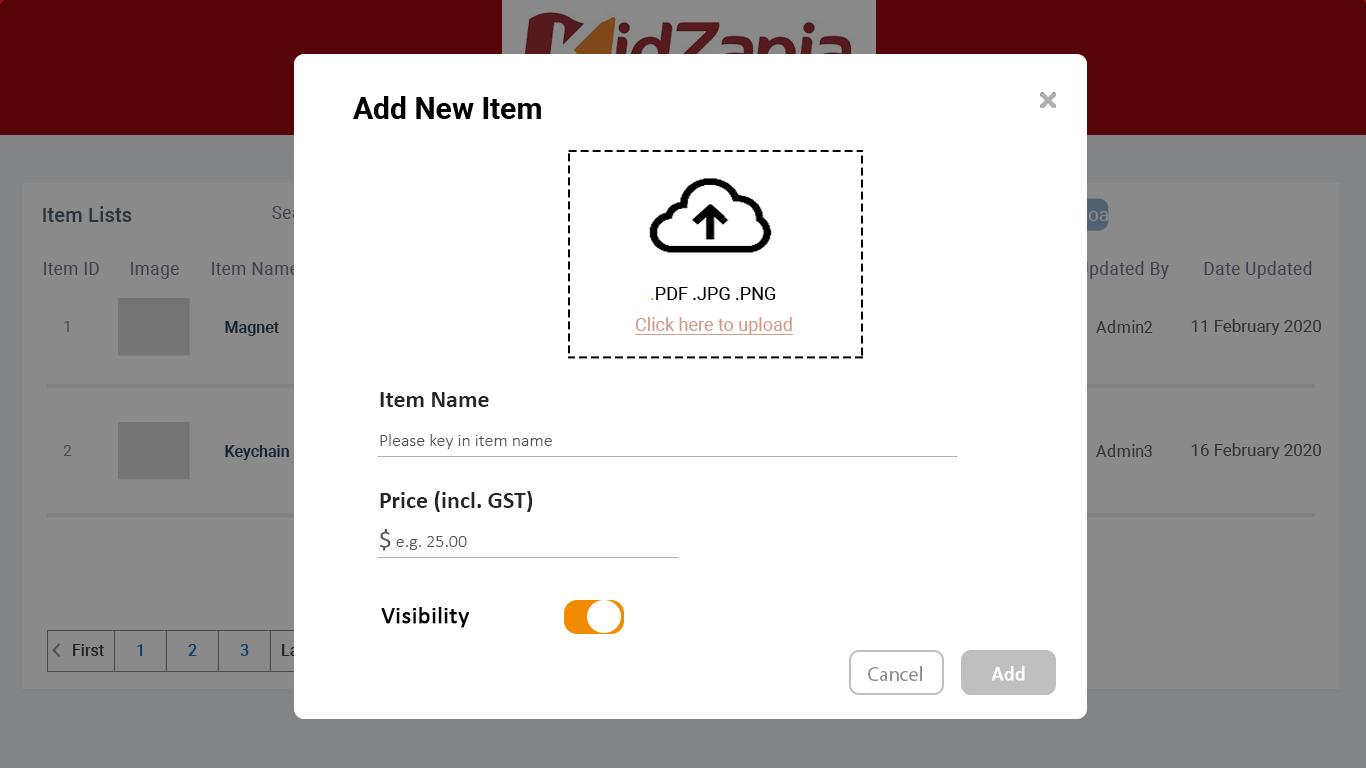
<style>
.page{position:relative;width:1366px;height:768px;background:#ffffff}
.page>*{position:absolute;margin:0}
.t1{font:30px "Roboto-Bold";color:#000000}
.t2{font:20.4px "Roboto-Medium";color:#2b333c}
.t3{font:17.5px "Roboto-Regular";letter-spacing:0.017em;color:#414150}
.t4{font:18px "Roboto-Regular";color:#010101}
.t5{font:18px "Roboto-Regular";color:#f28b00}
.t6{font:18px "Roboto-Regular";color:#d59685;text-decoration:underline}
.t7{font:14.6px "Roboto-Regular"}
.t8{font:16.1px "Roboto-Medium";color:#162332}
.t9{font:16.8px "Roboto-Regular";color:#333333}
.t10{font:16.8px "Roboto-Regular";letter-spacing:0.005em;color:#333333}
.t11{font:24px "Calibri-Bold";color:#262626}
.t12{font:18px "Calibri-Light";color:#575757}
.t13{font:14.6px "Roboto-Regular";color:#4d4d4e}
.t14{font:24px "Calibri-Light";color:#575757;font-weight:bold}
.t15{font:24px "Calibri";color:#000000;font-weight:bold}
.t16{font:16px "Roboto-Medium";color:#272222}
.t17{font:16px "Roboto-Medium";color:#0b406d}
.t18{font:20px "MyriadPro-Regular";color:#898888}
.t19{font:20px "Calibri";color:#ffffff;font-weight:bold}
</style>
<div class="page">
<p class="t1" style="left:353px;top:96px;width:188px;height:23px">Add New Item</p>
<p class="t2" style="left:43px;top:206px;width:89px;height:16px">Item Lists</p>
<p class="t3" style="left:44px;top:262px;width:55px;height:13px">Item ID</p>
<p class="t3" style="left:131px;top:262px;width:48px;height:17px">Image</p>
<p class="t3" style="left:212px;top:262px;width:87px;height:13px">Item Name</p>
<p class="t3" style="left:1078px;top:261px;width:91px;height:18px">Updated By</p>
<p class="t3" style="left:1204px;top:261px;width:108px;height:18px">Date Updated</p>
<p class="t4" style="left:651px;top:287px;width:125px;height:13px"><span class="t5">.</span>PDF .JPG .PNG</p>
<p class="t6" style="left:635px;top:317px;width:158px;height:18px">Click here to upload</p>
<p class="t7" style="left:64px;top:321px;width:5px;height:11px">1</p>
<p class="t8" style="left:225px;top:321px;width:54px;height:15px">Magnet</p>
<p class="t9" style="left:1096px;top:320px;width:57px;height:13px">Admin2</p>
<p class="t10" style="left:1191px;top:319px;width:130px;height:16px">11 February 2020</p>
<p class="t11" style="left:380px;top:392px;width:109px;height:15px">Item Name</p>
<p class="t12" style="left:380px;top:434px;width:172px;height:15px">Please key in item name</p>
<p class="t13" style="left:63px;top:445px;width:9px;height:11px">2</p>
<p class="t8" style="left:225px;top:445px;width:64px;height:15px">Keychain</p>
<p class="t9" style="left:1096px;top:444px;width:56px;height:13px">Admin3</p>
<p class="t10" style="left:1191px;top:443px;width:130px;height:16px">16 February 2020</p>
<p class="t11" style="left:380px;top:491px;width:153px;height:21px">Price (incl. GST)</p>
<p class="t12" style="left:380px;top:529px;width:87px;height:22px"><span class="t14">$</span> e.g. 25.00</p>
<p class="t15" style="left:381px;top:607px;width:88px;height:21px">Visibility</p>
<p class="t16" style="left:73px;top:644px;width:31px;height:12px">First</p>
<p class="t17" style="left:137px;top:644px;width:6px;height:12px">1</p>
<p class="t17" style="left:188px;top:644px;width:9px;height:12px">2</p>
<p class="t17" style="left:240px;top:644px;width:9px;height:12px">3</p>
<p class="t18" style="left:868px;top:666px;width:54px;height:15px">Cancel</p>
<p class="t19" style="left:991px;top:666px;width:34px;height:15px">Add</p>
</div>
